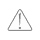
<style>
.page{position:relative;width:40px;height:40px;background:#ffffff}
.page>*{position:absolute;margin:0}
.t1{font:20.9px "TrajanPro-Regular";letter-spacing:-0.02em;color:#7e7e7e}
</style>
<div class="page">
<p class="t1" style="left:18px;top:12px;width:3px;height:17px">!</p>
</div>
